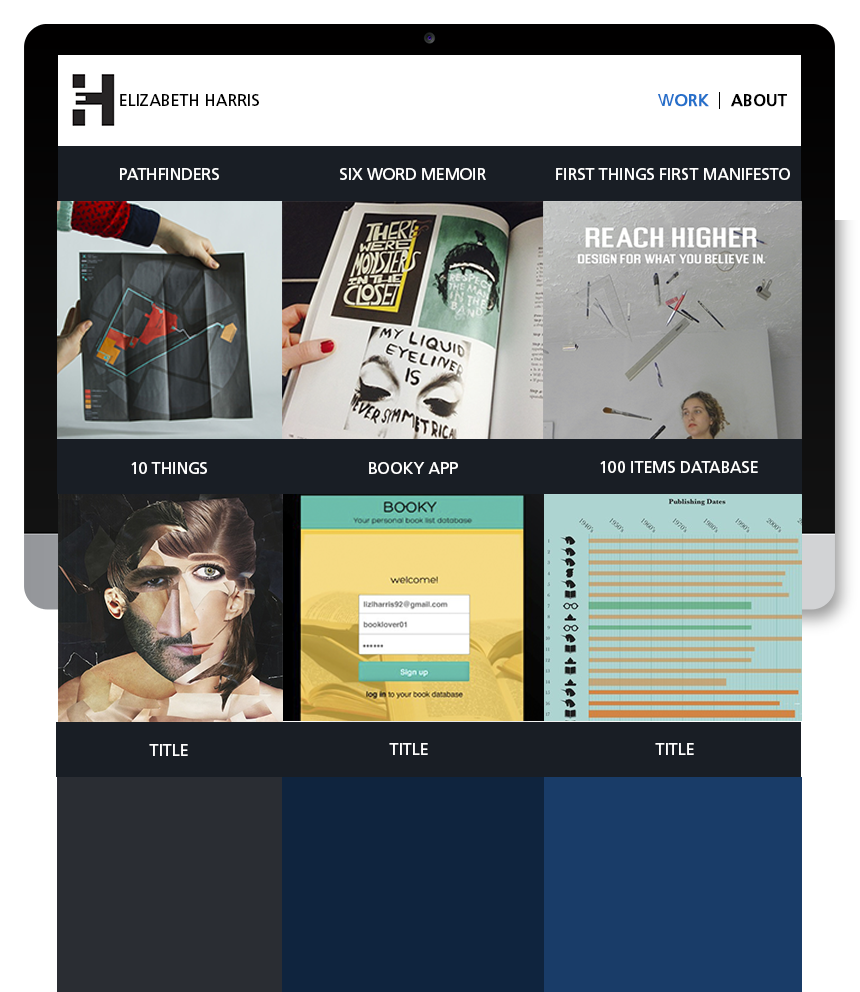
<style>
.page{position:relative;width:860px;height:992px}
.page>*{position:absolute;margin:0}
.t1{font:16px "Frutiger-Roman";color:#000000;text-transform:uppercase}
.t2{font:16px "Frutiger-Roman";color:#000000;text-transform:uppercase;font-weight:bold}
.t3{font:16px "Frutiger-Roman";color:#2670ca;text-transform:uppercase}
.t4{font:16px "Frutiger-Roman";color:#2670ca;text-transform:uppercase;font-weight:bold}
.t5{font:16px "Frutiger-Roman";color:#ffffff;text-transform:uppercase}
</style>
<div class="page">
<p class="t1" style="left:120px;top:94px;width:139px;height:12px">Elizabeth Harris</p>
<p class="t2" style="left:658px;top:94px;width:129px;height:13px"><span class="t3">W</span><span class="t4">ork </span>about</p>
<p class="t5" style="left:120px;top:168px;width:99px;height:12px">Pathfinders</p>
<p class="t5" style="left:340px;top:168px;width:146px;height:12px">Six Word Memoir</p>
<p class="t5" style="left:556px;top:168px;width:234px;height:12px">First Things First manifesto</p>
<p class="t5" style="left:131px;top:462px;width:76px;height:12px">10 things</p>
<p class="t5" style="left:369px;top:462px;width:89px;height:12px">booky app</p>
<p class="t5" style="left:600px;top:461px;width:158px;height:12px">100 items database</p>
<p class="t5" style="left:149px;top:744px;width:39px;height:12px">Title</p>
<p class="t5" style="left:389px;top:743px;width:39px;height:12px">Title</p>
<p class="t5" style="left:655px;top:743px;width:39px;height:12px">Title</p>
</div>
